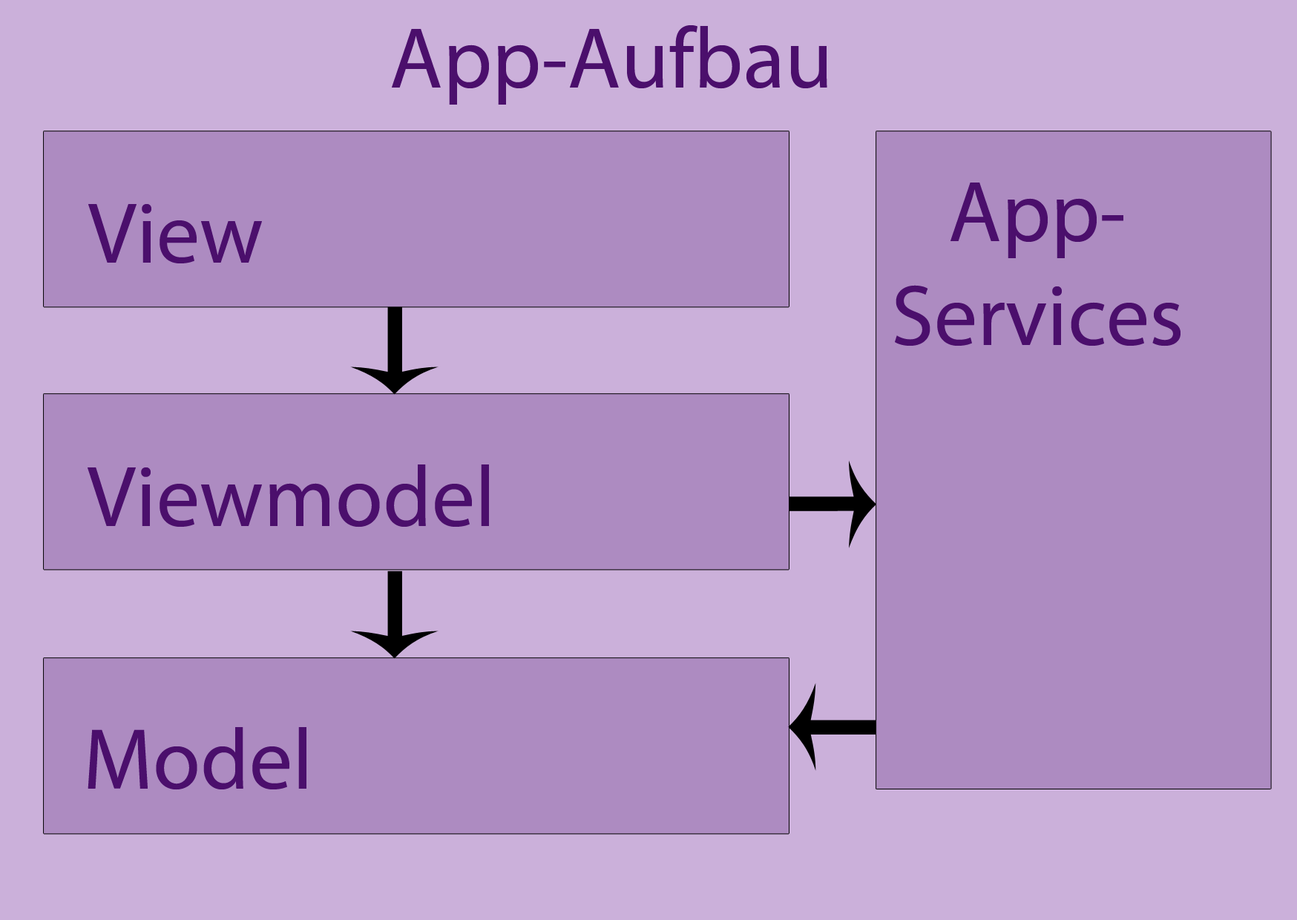
<style>
.page{position:relative;width:1297px;height:920px;background:#ad8bc1}
.page>*{position:absolute;margin:0}
.t1{font:86.5px "MyriadPro-Regular";color:#4b0f6c}
</style>
<div class="page">
<p class="t1" style="left:392px;top:25px;width:435px;height:80px">App-Aufbau</p>
<p class="t1" style="left:895px;top:182px;width:285px;height:164px;text-align:center">App-<br>Services</p>
<p class="t1" style="left:88px;top:204px;width:174px;height:59px">View</p>
<p class="t1" style="left:88px;top:464px;width:401px;height:63px">Viewmodel</p>
<p class="t1" style="left:88px;top:727px;width:218px;height:63px">Model</p>
</div>
